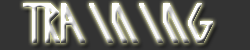
<style>
.page{position:relative;width:250px;height:50px;background:#333333}
.page>*{position:absolute;margin:0}
.t1{font:48px "exoziti";font-weight:bold}
</style>
<div class="page">
<p class="t1" style="left:23px;top:3px;width:190px;height:40px">TRAINING</p>
</div>
